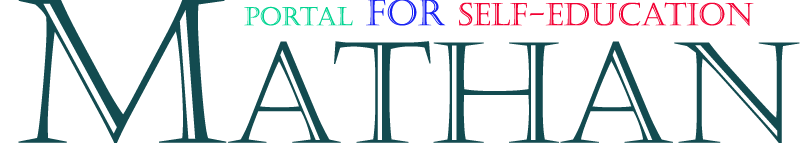
<style>
.page{position:relative;width:800px;height:143px;background:#ffffff}
.page>*{position:absolute;margin:0}
.t1{font:31px "Castellar";color:#f20033;font-variant:small-caps}
.t2{font:36px "Castellar";color:#00d491;font-variant:small-caps}
.t3{font:36px "Castellar";color:#1620f3;font-variant:small-caps}
</style>
<div class="page">
<p class="t1" style="left:244px;top:0px;width:510px;height:26px"><span class="t2">portal </span><span class="t3">FOR </span>SELF-EDUCATION</p>
</div>
